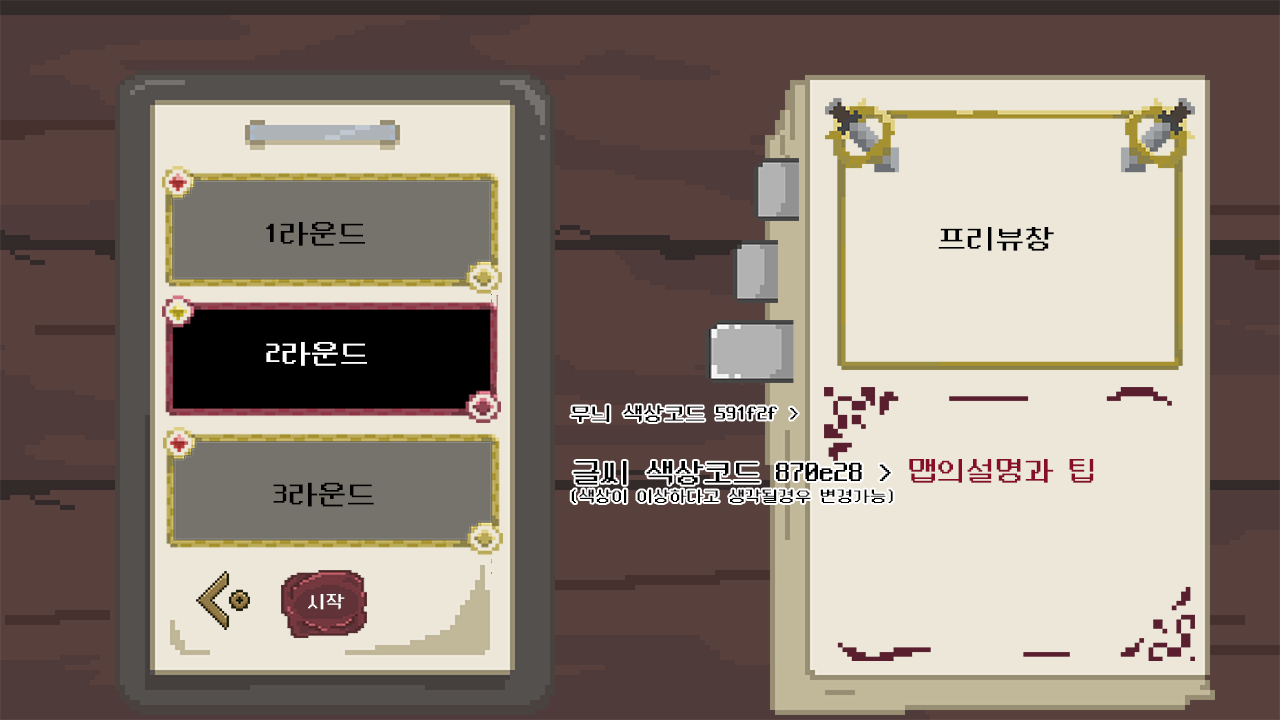
<style>
.page{position:relative;width:1280px;height:720px;background:#ece7d9}
.page>*{position:absolute;margin:0}
.t1{font:29.2px "NeoDunggeunmo-Regular";color:#000000}
.t2{font:29.2px "NeoDunggeunmo-Regular";color:#ffffff}
.t3{font:20.8px "NeoDunggeunmo-Regular";color:#000000}
.t4{font:16.7px "NeoDunggeunmo-Regular";color:#000000}
.t5{font:29.2px "NeoDunggeunmo-Regular";color:#870e28}
.t6{font:18.8px "NeoDunggeunmo-Regular";color:#ffffff}
</style>
<div class="page">
<p class="t1" style="left:266px;top:222px;width:99px;height:24px">1라운드</p>
<p class="t1" style="left:938px;top:227px;width:116px;height:24px">프리뷰창</p>
<p class="t2" style="left:266px;top:342px;width:101px;height:24px">2라운드</p>
<p class="t3" style="left:571px;top:405px;width:227px;height:17px">무늬 색상코드 591f2f &gt;</p>
<p class="t4" style="left:571px;top:461px;width:322px;height:42px;text-align:center"><span class="t1">글씨 색상코드 870e28 &gt;<br></span>(색상이 이상하다고 생각될경우 변경가능)</p>
<p class="t5" style="left:909px;top:459px;width:185px;height:24px">맵의설명과 팁</p>
<p class="t1" style="left:273px;top:482px;width:101px;height:25px">3라운드</p>
<p class="t6" style="left:308px;top:594px;width:37px;height:16px">시작</p>
</div>
